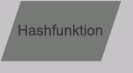
<style>
.page{position:relative;width:133px;height:73px;background:#767976}
.page>*{position:absolute;margin:0}
.t1{font:14.7px "ArialMT";color:#3b3c3b}
</style>
<div class="page">
<p class="t1" style="left:18px;top:24px;width:85px;height:12px">Hashfunktion</p>
</div>
